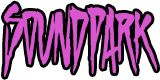
<style>
.page{position:relative;width:160px;height:80px;background:#ffffff}
.page>*{position:absolute;margin:0}
.t1{font:85px "GoingUnderRegular";color:#d957ce;scale:0.59 1}
</style>
<div class="page">
<p class="t1" style="left:4px;top:3px;width:153px;height:74px">SoundPark</p>
</div>
